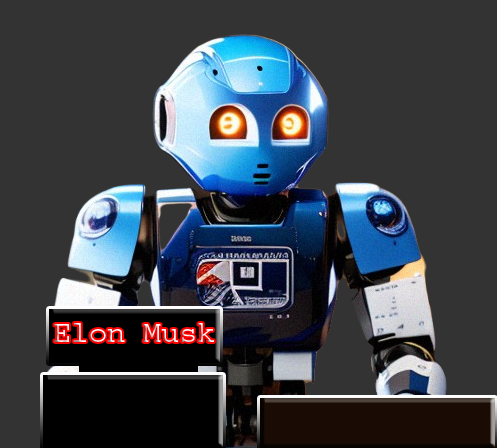
<style>
.page{position:relative;width:497px;height:448px;background:#333333}
.page>*{position:absolute;margin:0}
.t1{font:30px "Courier"}
</style>
<div class="page">
<p class="t1" style="left:54px;top:323px;width:160px;height:19px">Elon Musk</p>
</div>
